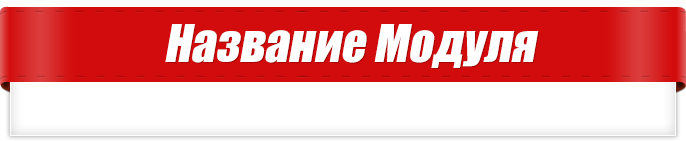
<style>
.page{position:relative;width:686px;height:141px;background:#ffffff}
.page>*{position:absolute;margin:0}
.t1{font:48px "Impact";color:#ffffff;font-style:italic}
</style>
<div class="page">
<p class="t1" style="left:165px;top:24px;width:374px;height:44px">Название Модуля</p>
</div>
